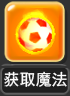
<style>
.page{position:relative;width:70px;height:96px}
.page>*{position:absolute;margin:0}
.t1{font:16px "SimHei";color:#ffffff}
</style>
<div class="page">
<p class="t1" style="left:4px;top:71px;width:63px;height:16px">获取魔法</p>
</div>
